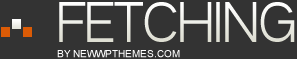
<style>
.page{position:relative;width:297px;height:59px;background:#333333}
.page>*{position:absolute;margin:0}
.t1{font:60px "SFArborcrestLight";color:#ffffff;text-transform:uppercase}
.t2{font:10px "ArialMT";color:#ffffff;text-transform:uppercase}
</style>
<div class="page">
<p class="t1" style="left:59px;top:2px;width:236px;height:40px">Fetching</p>
<p class="t2" style="left:57px;top:50px;width:123px;height:8px">by NewWpThemes.com</p>
</div>
